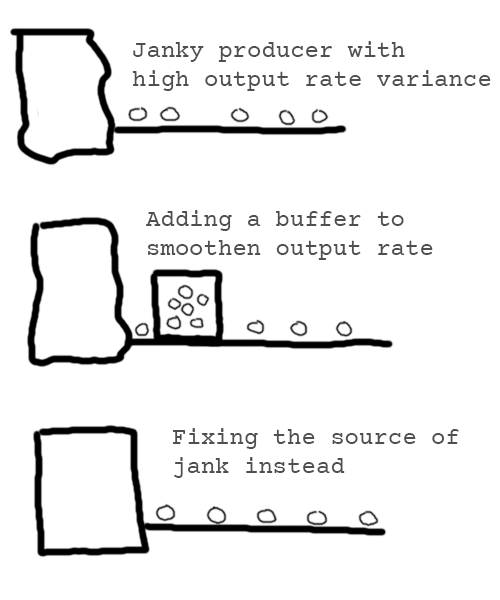
<style>
.page{position:relative;width:500px;height:600px;background:#ffffff}
.page>*{position:absolute;margin:0}
.t1{font:24px "CourierPrime";color:#4f4f4f}
</style>
<div class="page">
<p class="t1" style="left:132px;top:41px;width:359px;height:50px">Janky producer with<br>high output rate variance</p>
<p class="t1" style="left:146px;top:210px;width:287px;height:50px">Adding a buffer to <br>smoothen output rate</p>
<p class="t1" style="left:172px;top:428px;width:287px;height:50px">Fixing the source of <br>jank instead</p>
</div>
